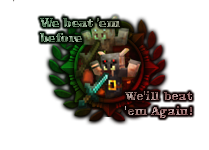
<style>
.page{position:relative;width:209px;height:150px;background:#ffffff}
.page>*{position:absolute;margin:0}
.t1{font:12.8px "ClarendonBT-Black"}
.t2{font:12.5px "ClarendonBT-Black"}
</style>
<div class="page">
<p class="t1" style="left:40px;top:18px;width:80px;height:24px">We beat 'em <br>before</p>
<p class="t2" style="left:125px;top:91px;width:67px;height:27px">We'ill beat <br>'em Again!</p>
</div>
